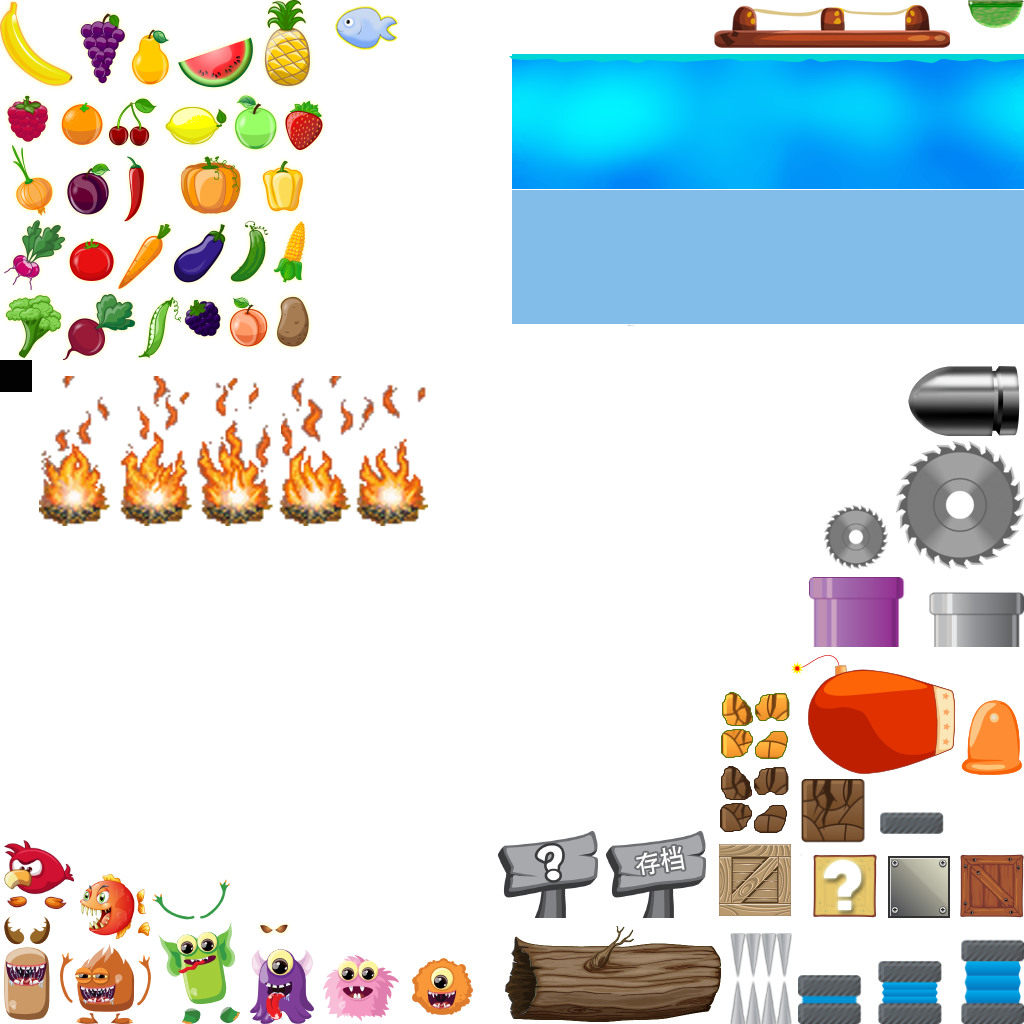
<style>
.page{position:relative;width:1024px;height:1024px;background:#ffffff}
.page>*{position:absolute;margin:0}
.t1{font:25px "AdobeHeitiStd-Regular";color:#ffffff}
.t2{font:25px "MicrosoftTaiLe-Bold";color:#ffffff}
</style>
<div class="page">
<p class="t1" style="left:635px;top:845px;width:50px;height:31px;rotate:-9deg"><span class="t2"> </span>存档</p>
</div>
